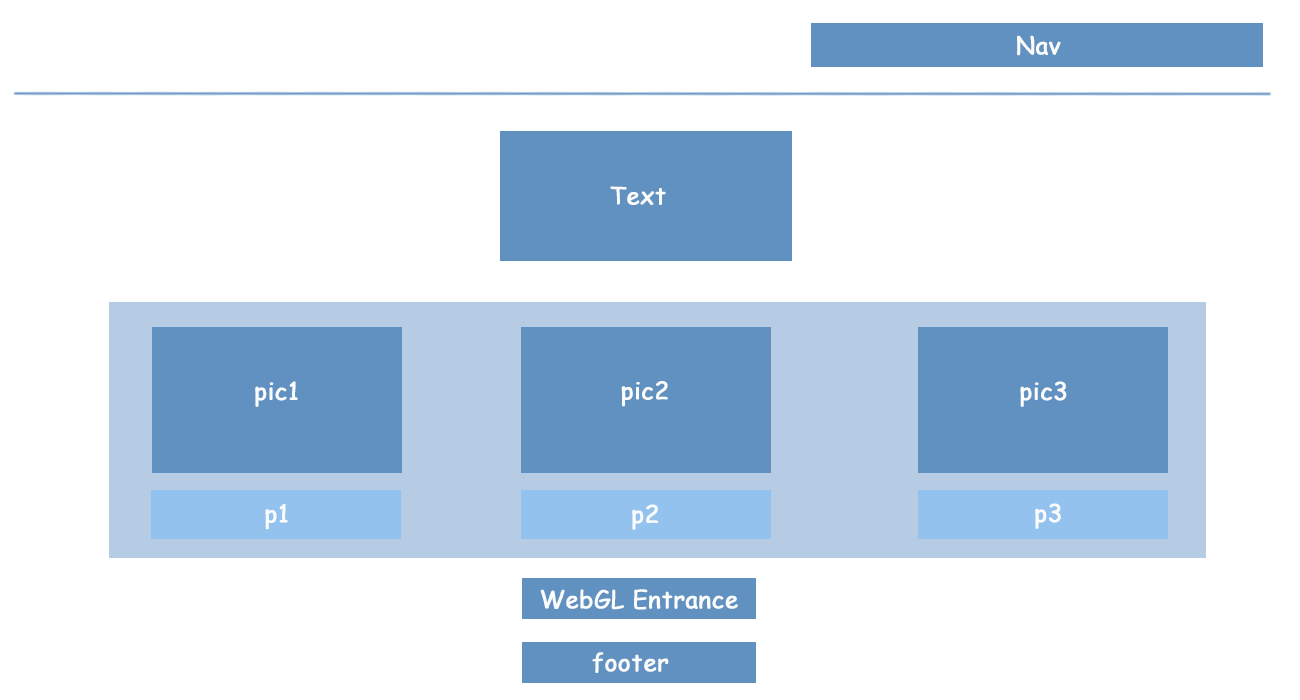
<style>
.page{position:relative;width:1300px;height:700px;background:#ffffff}
.page>*{position:absolute;margin:0}
.t1{font:24px "ComicSansMS";color:#fdfdfd;font-weight:bold}
.t2{font:24px "ComicSansMS";color:#fbfcfc;font-weight:bold}
</style>
<div class="page">
<p class="t1" style="left:1017px;top:35px;width:44px;height:21px">Nav</p>
<p class="t2" style="left:610px;top:186px;width:56px;height:19px">Text</p>
<p class="t2" style="left:255px;top:381px;width:43px;height:26px">pic1</p>
<p class="t2" style="left:621px;top:381px;width:47px;height:26px">pic2</p>
<p class="t2" style="left:1020px;top:381px;width:47px;height:26px">pic3</p>
<p class="t2" style="left:265px;top:504px;width:23px;height:26px">p1</p>
<p class="t2" style="left:632px;top:504px;width:26px;height:26px">p2</p>
<p class="t2" style="left:1035px;top:503px;width:26px;height:26px">p3</p>
<p class="t2" style="left:540px;top:589px;width:198px;height:21px">WebGL Entrance</p>
<p class="t2" style="left:592px;top:652px;width:77px;height:21px">footer</p>
</div>
